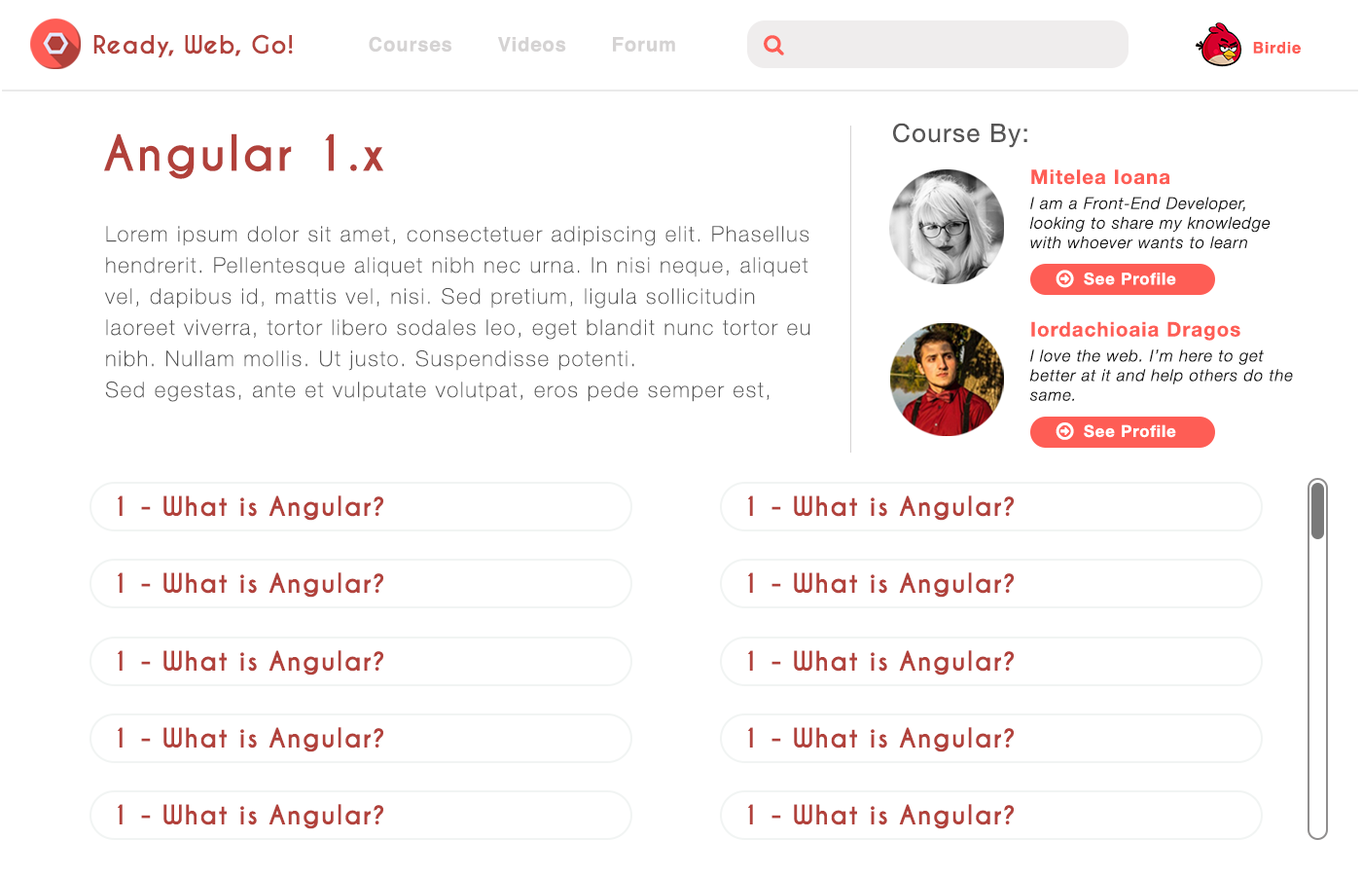
<style>
.page{position:relative;width:1362px;height:876px;background:#ffffff}
.page>*{position:absolute;margin:0}
.t1{font:23.3px "CaviarDreams-Bold";letter-spacing:0.05em;color:#b1413b}
.t2{font:19.5px "Helvetica-Bold";letter-spacing:0.05em;color:#d5d3d3}
.t3{font:15.6px "Helvetica-Bold";letter-spacing:0.05em;color:#fe5d55}
.t4{font:25.3px "HelveticaNeue";letter-spacing:0.05em;color:#565555}
.t5{font:46.7px "CaviarDreams-Bold";letter-spacing:0.05em;color:#b1413b}
.t6{font:19.9px "HelveticaNeue-Bold";letter-spacing:0.05em;color:#fe5d55}
.t7{font:16.3px "HelveticaNeue-LightItalic";letter-spacing:0.05em;color:#131313}
.t8{font:21.4px/31.1px "HelveticaNeue-Thin";letter-spacing:0.08em;color:#565656}
.t9{font:16.3px "HelveticaNeue-Bold";letter-spacing:0.05em;color:#ffffff}
.t10{font:25.3px "CaviarDreams-Bold";letter-spacing:0.05em;color:#b1413b}
</style>
<div class="page">
<p class="t1" style="left:93px;top:34px;width:200px;height:23px">Ready, Web, Go!</p>
<p class="t2" style="left:369px;top:36px;width:306px;height:16px">Courses       Videos       Forum</p>
<p class="t3" style="left:1253px;top:42px;width:48px;height:12px">Birdie</p>
<p class="t4" style="left:893px;top:123px;width:134px;height:25px">Course By:</p>
<p class="t5" style="left:104px;top:133px;width:279px;height:46px">Angular 1.x</p>
<p class="t6" style="left:1031px;top:169px;width:139px;height:16px">Mitelea Ioana</p>
<p class="t7" style="left:1029px;top:197px;width:242px;height:52px">I am a Front-End Developer, <br>looking to share my knowledge with whoever wants to learn</p>
<p class="t8" style="left:105px;top:226px;width:705px;height:176px">Lorem ipsum dolor sit amet, consectetuer adipiscing elit. Phasellus hendrerit. Pellentesque aliquet nibh nec urna. In nisi neque, aliquet vel, dapibus id, mattis vel, nisi. Sed pretium, ligula sollicitudin laoreet viverra, tortor libero sodales leo, eget blandit nunc tortor eu nibh. Nullam mollis. Ut justo. Suspendisse potenti.<br>Sed egestas, ante et vulputate volutpat, eros pede semper est,</p>
<p class="t9" style="left:1084px;top:272px;width:92px;height:13px">See Profile</p>
<p class="t6" style="left:1031px;top:321px;width:209px;height:19px">Iordachioaia Dragos</p>
<p class="t7" style="left:1029px;top:349px;width:264px;height:52px">I love the web. I’m here to get better at it and help others do the same.</p>
<p class="t9" style="left:1084px;top:424px;width:92px;height:14px">See Profile</p>
<p class="t10" style="left:118px;top:495px;width:265px;height:25px">1 - What is Angular?</p>
<p class="t10" style="left:748px;top:495px;width:266px;height:25px">1 - What is Angular?</p>
<p class="t10" style="left:118px;top:572px;width:265px;height:25px">1 - What is Angular?</p>
<p class="t10" style="left:748px;top:572px;width:266px;height:25px">1 - What is Angular?</p>
<p class="t10" style="left:118px;top:650px;width:265px;height:25px">1 - What is Angular?</p>
<p class="t10" style="left:748px;top:650px;width:266px;height:25px">1 - What is Angular?</p>
<p class="t10" style="left:118px;top:727px;width:265px;height:25px">1 - What is Angular?</p>
<p class="t10" style="left:748px;top:727px;width:266px;height:25px">1 - What is Angular?</p>
<p class="t10" style="left:118px;top:804px;width:265px;height:25px">1 - What is Angular?</p>
<p class="t10" style="left:748px;top:804px;width:266px;height:25px">1 - What is Angular?</p>
</div>
